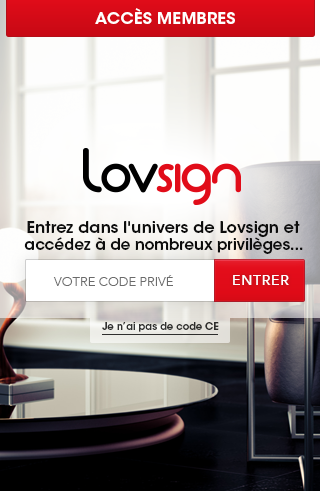
<style>
.page{position:relative;width:320px;height:491px}
.page>*{position:absolute;margin:0}
.t1{font:16px "ITCAvantGardeStd-Demi";letter-spacing:0.025em;color:#ffffff}
.t2{font:16.2px/17.3px "ITCAvantGardeStd-Demi";color:#0d0d0d}
.t3{font:15.2px/17.3px "ITCAvantGardeStd-Demi";color:#0d0d0d}
.t4{font:13px "AvenirLT-Light";color:#6b6b6b;text-transform:uppercase}
.t5{font:14px "AvenirLT-Medium";letter-spacing:0.05em;color:#ffffff;text-transform:uppercase}
.t6{font:10px "ITCAvantGardeStd-Demi";letter-spacing:-0.005em;color:#30312f}
</style>
<div class="page">
<p class="t1" style="left:95px;top:8px;width:140px;height:16px">ACCÈS MEMBRES</p>
<p class="t2" style="left:24px;top:221px;width:279px;height:33px;text-align:center">Entrez dans l'univers de Lovsign et<br><span class="t3">accédez à de nombreux privilèges...</span></p>
<p class="t4" style="left:53px;top:275px;width:120px;height:11px">VOTRE CODE PRIVÉ</p>
<p class="t5" style="left:233px;top:275px;width:56px;height:10px">ENTRER</p>
<p class="t6" style="left:102px;top:322px;width:117px;height:10px">Je n’ai pas de code CE</p>
</div>
